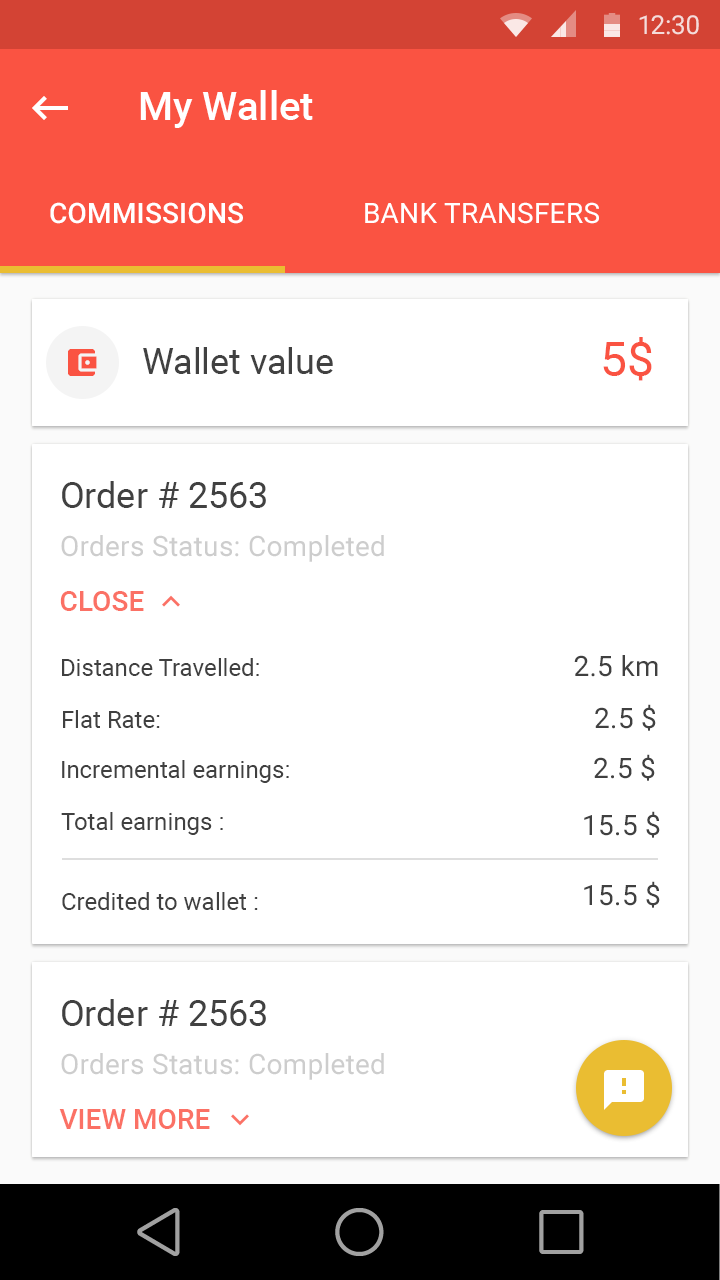
<style>
.page{position:relative;width:720px;height:1280px;background:#ffffff}
.page>*{position:absolute;margin:0}
.t1{font:40px "Roboto-Medium";color:#ffffff}
.t2{font:28px "Roboto-Medium";letter-spacing:0.01em;color:#ffffff;text-transform:uppercase}
.t3{font:28px "Roboto-Regular";letter-spacing:0.01em;color:#ffffff;text-transform:uppercase}
.t4{font:48px "Roboto-Regular";color:#fa5342;text-transform:uppercase}
.t5{font:36px "Roboto-Regular";color:#414141}
.t6{font:28px "Roboto-Regular";letter-spacing:0.01em;color:#cdcdcd}
.t7{font:28px "Roboto-Medium";color:#fb7165;text-transform:uppercase}
.t8{font:24px "Roboto-Regular";color:#404040}
.t9{font:28px "Roboto-Regular";letter-spacing:0.01em;color:#404040;text-transform:uppercase}
.t10{font:28px "Roboto-Regular";letter-spacing:0.01em;color:#404040}
</style>
<div class="page">
<p class="t1" style="left:140px;top:90px;width:173px;height:38px">My Wallet</p>
<p class="t2" style="left:50px;top:202px;width:193px;height:22px">Commissions</p>
<p class="t3" style="left:365px;top:202px;width:234px;height:22px">Bank Transfers</p>
<p class="t4" style="left:603px;top:337px;width:49px;height:44px">5$</p>
<p class="t5" style="left:143px;top:347px;width:190px;height:27px">Wallet value</p>
<p class="t5" style="left:62px;top:481px;width:204px;height:27px">Order # 2563</p>
<p class="t6" style="left:61px;top:535px;width:323px;height:27px">Orders Status: Completed</p>
<p class="t7" style="left:60px;top:591px;width:84px;height:20px">Close</p>
<p class="t8" style="left:62px;top:658px;width:197px;height:18px">Distance Travelled:</p>
<p class="t9" style="left:574px;top:655px;width:84px;height:22px">2.5 <span class="t10">km</span></p>
<p class="t8" style="left:63px;top:710px;width:97px;height:18px">Flat Rate:</p>
<p class="t9" style="left:595px;top:704px;width:61px;height:27px">2.5 $</p>
<p class="t8" style="left:62px;top:760px;width:227px;height:23px">Incremental earnings:</p>
<p class="t9" style="left:594px;top:754px;width:61px;height:27px">2.5 $</p>
<p class="t8" style="left:61px;top:812px;width:162px;height:23px">Total earnings :</p>
<p class="t9" style="left:584px;top:811px;width:76px;height:27px">15.5 $</p>
<p class="t9" style="left:584px;top:881px;width:76px;height:27px">15.5 $</p>
<p class="t8" style="left:62px;top:892px;width:196px;height:18px">Credited to wallet :</p>
<p class="t5" style="left:62px;top:999px;width:204px;height:27px">Order # 2563</p>
<p class="t6" style="left:61px;top:1053px;width:323px;height:27px">Orders Status: Completed</p>
<p class="t7" style="left:59px;top:1109px;width:151px;height:20px">View More</p>
</div>
